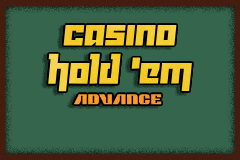
<style>
.page{position:relative;width:240px;height:160px;background:#35654d}
.page>*{position:absolute;margin:0}
.t1{font:38.2px "Yukarimobile";color:#f4ce2c}
.t2{font:14.6px "ContourGenerator-Regular";color:#fb9b28}
</style>
<div class="page">
<p class="t1" style="left:48px;top:25px;width:144px;height:67px;text-align:center">Casino<br>Hold 'Em</p>
<p class="t2" style="left:73px;top:94px;width:89px;height:11px">advance</p>
</div>
